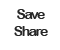
<style>
.page{position:relative;width:60px;height:50px;background:#ffffff}
.page>*{position:absolute;margin:0}
.t1{font:14px "ArialRoundedMTBold";letter-spacing:-0.1em;color:#282828}
</style>
<div class="page">
<p class="t1" style="left:14px;top:9px;width:34px;height:27px;text-align:center">Save<br>Share</p>
</div>
